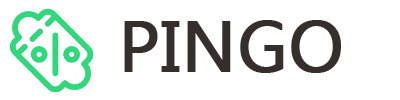
<style>
.page{position:relative;width:400px;height:100px;background:#ffffff}
.page>*{position:absolute;margin:0}
.t1{font:72px "Ebrima";color:#362e2b;font-weight:bold}
</style>
<div class="page">
<p class="t1" style="left:124px;top:20px;width:217px;height:53px">PINGO</p>
</div>
